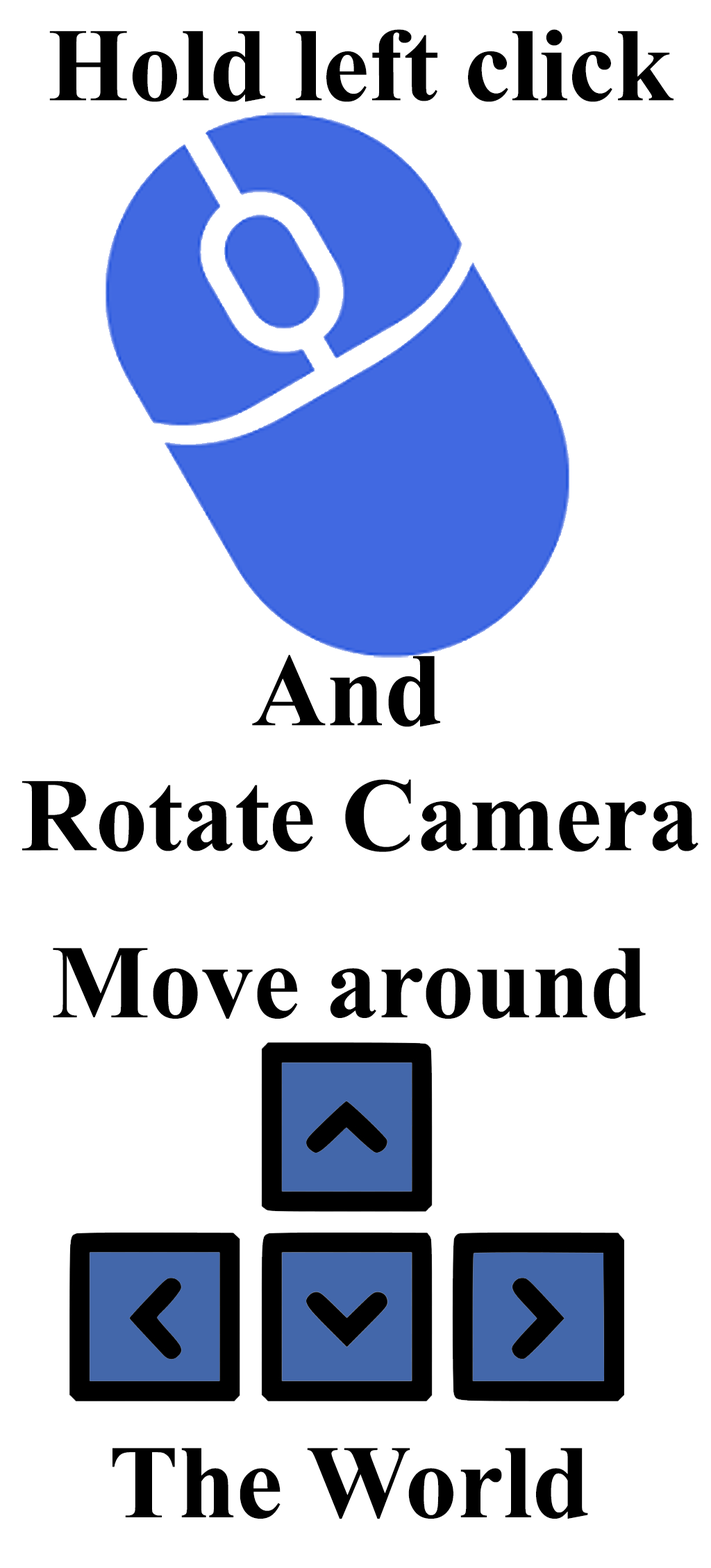
<style>
.page{position:relative;width:711px;height:1568px;background:#ffffff}
.page>*{position:absolute;margin:0}
.t1{font:104.2px "TimesNewRomanPS-BoldMT";color:#000000}
</style>
<div class="page">
<p class="t1" style="left:22px;top:29px;width:677px;height:823px;text-align:center">Hold left click<br><br><br><br><br>And <br>Rotate Camera</p>
<p class="t1" style="left:53px;top:948px;width:593px;height:571px;text-align:center">Move around<br><br><br><br>The World</p>
</div>
